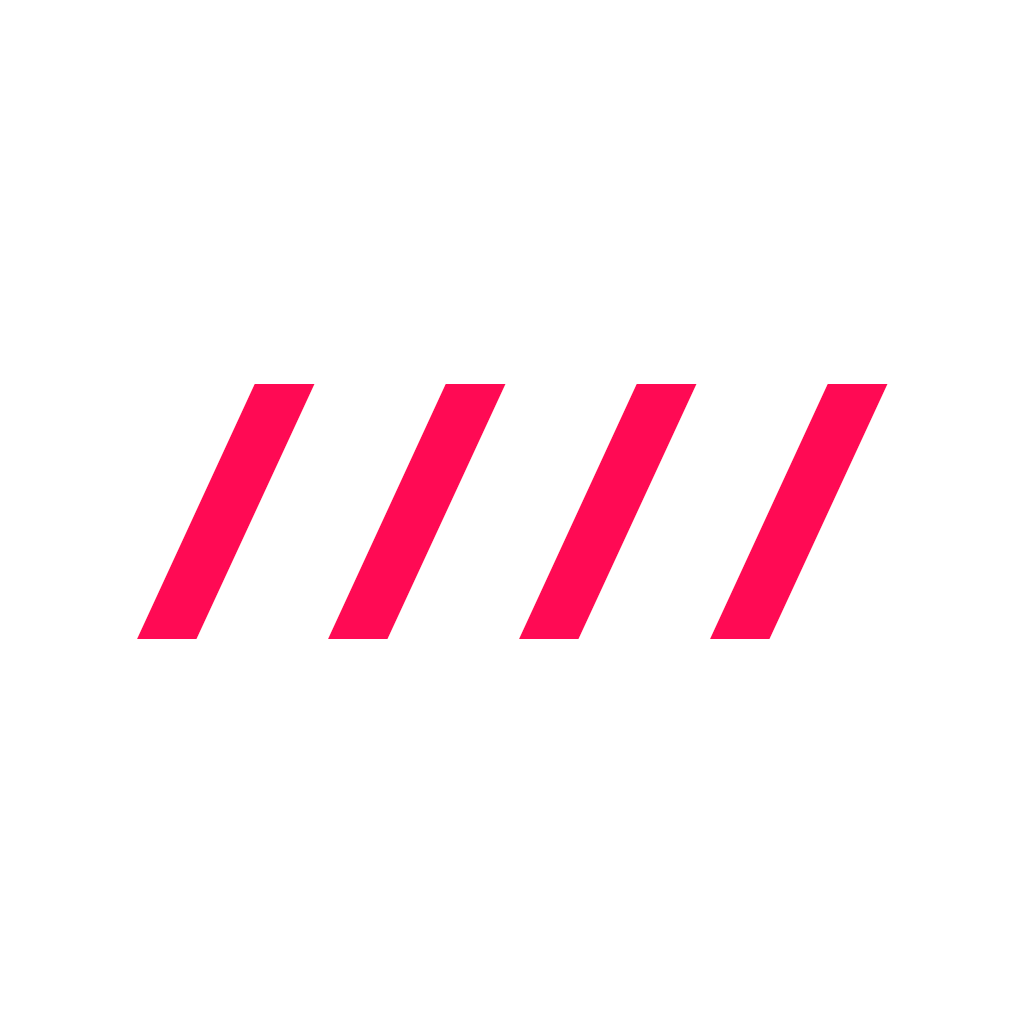
<style>
.page{position:relative;width:1024px;height:1024px;background:#ffffff}
.page>*{position:absolute;margin:0}
.t1{font:340px "BigJohnPRO-Bold";color:#ff0a54}
</style>
<div class="page">
<p class="t1" style="left:137px;top:384px;width:751px;height:255px">////</p>
</div>
